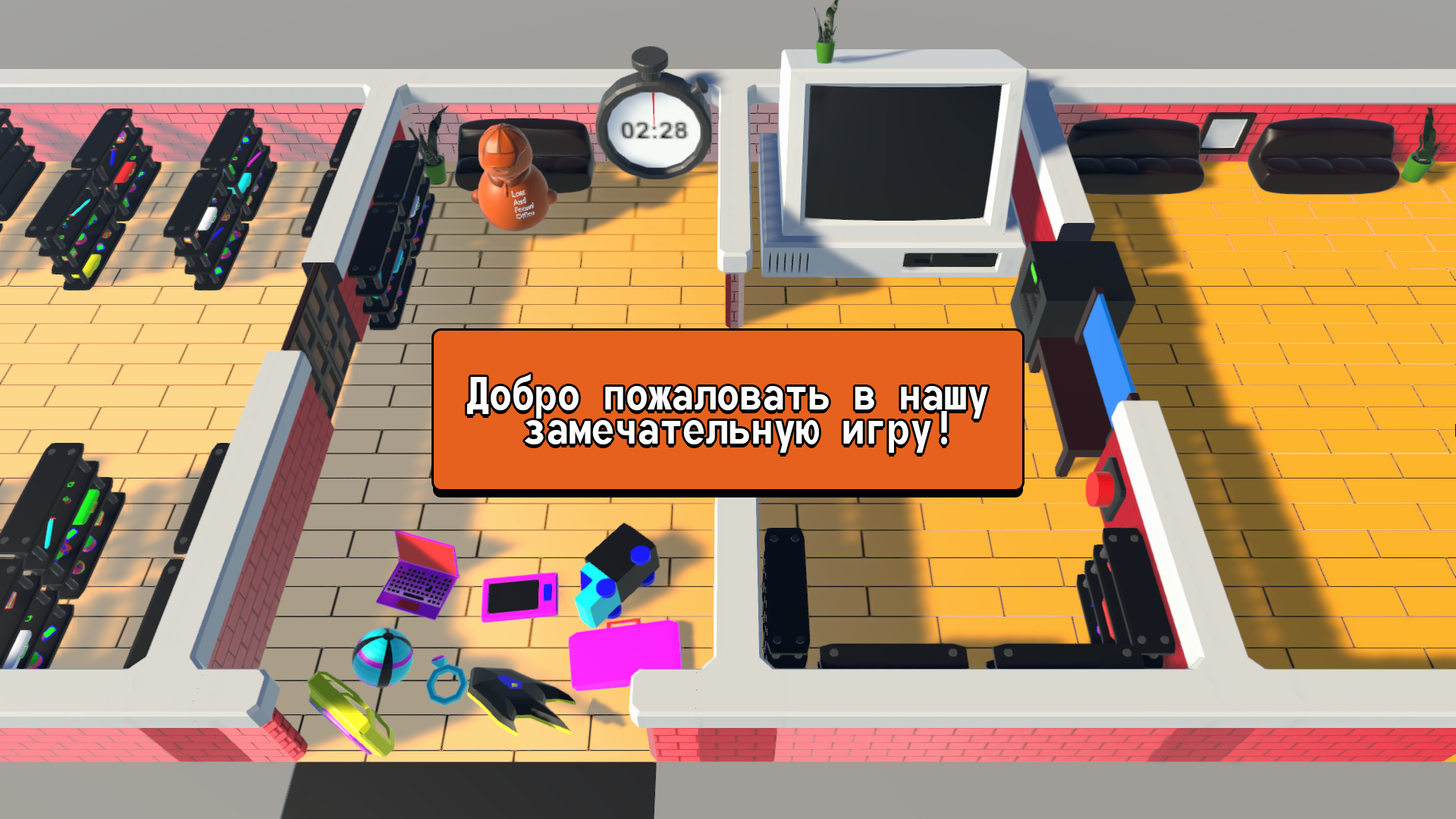
<style>
.page{position:relative;width:1456px;height:819px}
.page>*{position:absolute;margin:0}
.t1{font:56.9px/34.8px "MonofontoRUSBYMelman-Regular";color:#fdfefd}
</style>
<div class="page">
<p class="t1" style="left:467px;top:374px;width:521px;height:79px;text-align:center">Добро пожаловать в нашу<br> замечательную игру!</p>
</div>
